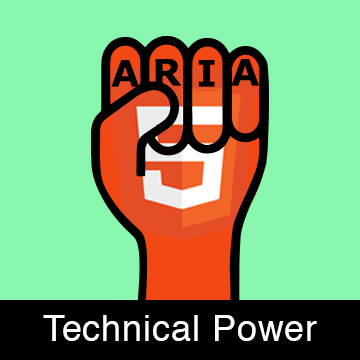
<style>
.page{position:relative;width:360px;height:360px;background:#88f6af}
.page>*{position:absolute;margin:0}
.t1{font:36px "Helvetica";letter-spacing:0.025em;color:#ffffff}
</style>
<div class="page">
<p class="t1" style="left:43px;top:315px;width:274px;height:26px">Technical Power</p>
</div>
